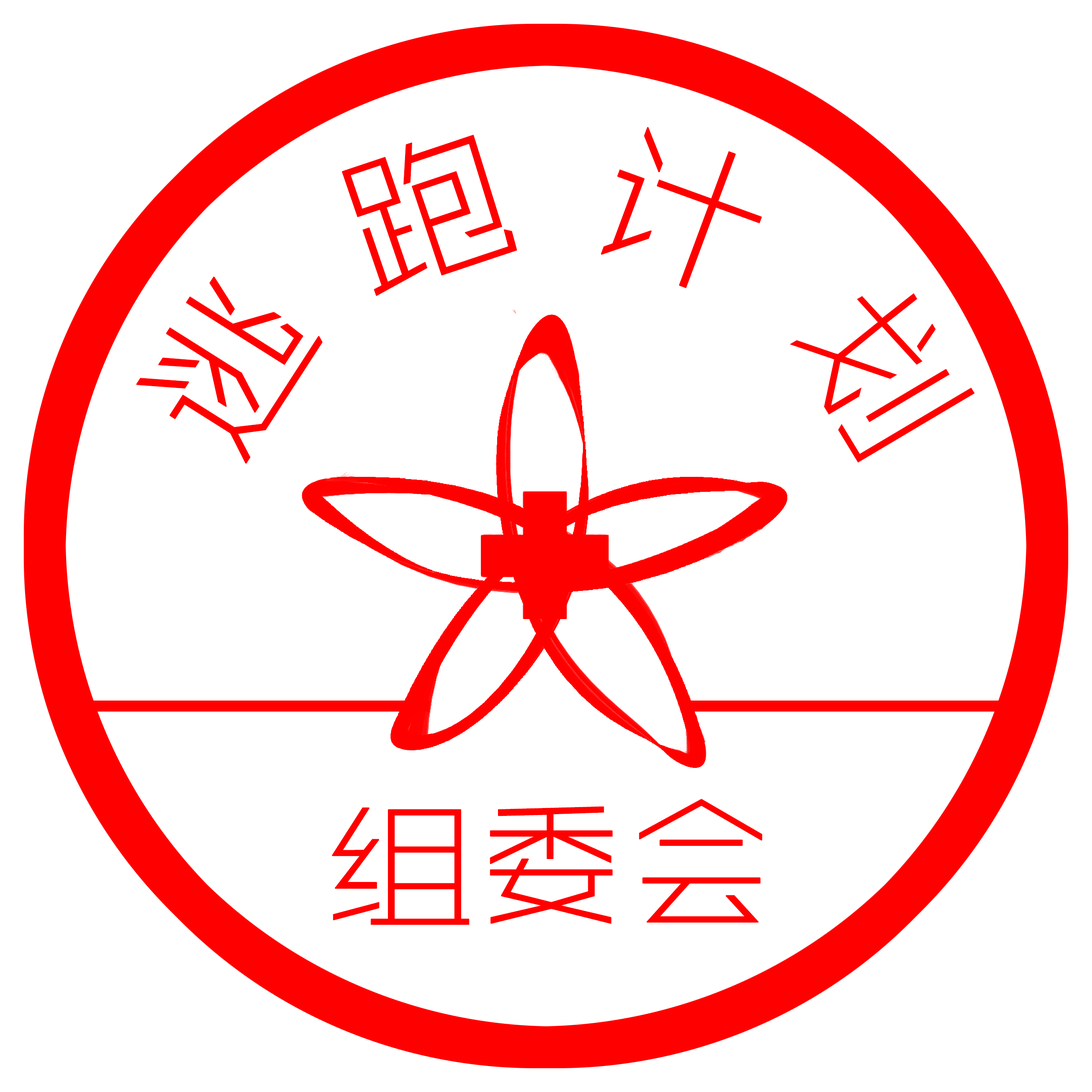
<style>
.page{position:relative;width:1092px;height:1092px;background:#ffffff}
.page>*{position:absolute;margin:0}
.t1{font:165.3px "ZHSRXT--GBK1-0";color:#ff0000;font-weight:bold}
.t2{font:146.9px "ZHSRXT--GBK1-0";color:#ff0000;font-weight:bold}
.t3{font:146.8px "ZHSRXT--GBK1-0";color:#ff0000;font-weight:bold}
</style>
<div class="page">
<p class="t1" style="left:136px;top:127px;width:839px;height:337px;rotate:14deg"><span class="t2"> </span>逃 跑 计 划</p>
<p class="t3" style="left:332px;top:799px;width:430px;height:126px">组委会</p>
</div>
